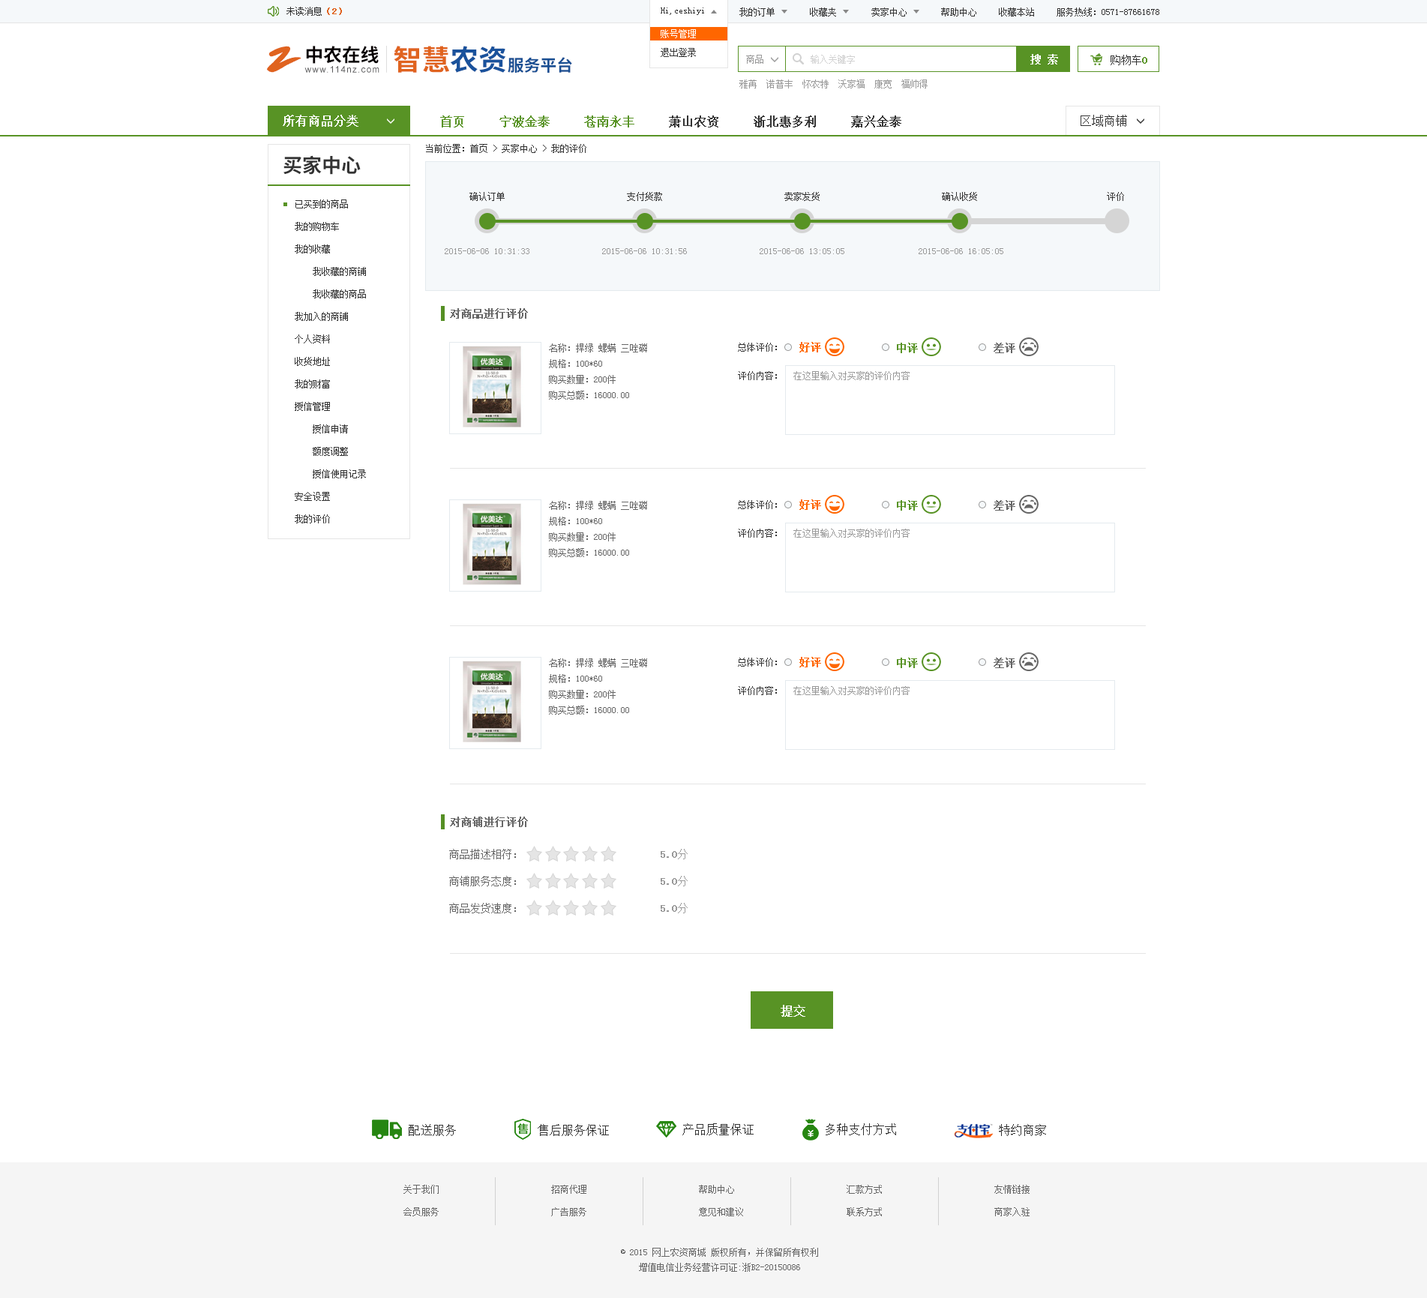
<style>
.page{position:relative;width:1427px;height:1298px;background:#ffffff}
.page>*{position:absolute;margin:0}
.t1{font:9px "SimSun";color:#333333}
.t2{font:9px "SimSun";color:#e0631f;font-weight:bold}
.t3{font:9px/18.8px "SimSun";color:#ffffff}
.t4{font:9px/18.8px "SimSun";color:#333333}
.t5{font:38px "SmudgerLetPlain";color:#e0631f}
.t6{font:18.6px "SourceHanSansCN-Bold";color:#060001}
.t7{font:28.4px "SourceHanSansCN-Bold";color:#e0631f}
.t8{font:28.4px "SourceHanSansCN-Bold";color:#1a529c}
.t9{font:10.5px "SimSun";color:#ffffff;font-weight:bold}
.t10{font:16.3px "SourceHanSansCN-Bold";color:#194f93}
.t11{font:9px "SimSun";color:#999999}
.t12{font:9px "SimSun";color:#d1d1d1}
.t13{font:10.5px "SimSun";color:#333333}
.t14{font:10.5px "SimSun";color:#589325;font-weight:bold}
.t15{font:8.9px "ArialMT";letter-spacing:0.1em;color:#585859}
.t16{font:12px "SimSun";color:#ffffff;font-weight:bold}
.t17{font:12px "SimSun";color:#333333;font-weight:bold}
.t18{font:12px "SimSun";color:#589325;font-weight:bold}
.t19{font:12px "SimSun";color:#333333}
.t20{font:19.5px "SourceHanSansCN-Bold";color:#333333}
.t21{font:9px/22.5px "SimSun";color:#333333}
.t22{font:10.5px "SimSun";color:#666666;font-weight:bold}
.t23{font:10.5px "SimSun";color:#ff6600;font-weight:bold}
.t24{font:9px "SimSun";color:#666666}
.t25{font:10.5px/27px "SimSun";color:#666666}
.t26{font:10.5px/27px "SimSun";color:#999999;font-weight:bold}
.t27{font:10.5px/27px "SimSun";color:#999999}
.t28{font:9px/22.5px "SimSun";color:#666666}
.t29{font:9px/15px "SimSun";color:#666666}
</style>
<div class="page">
<p class="t1" style="left:286px;top:7px;width:56px;height:9px">未读消息<span class="t2">（2）</span></p>
<p class="t1" style="left:661px;top:8px;width:43px;height:7px">Hi,ceshiyi</p>
<p class="t1" style="left:661px;top:8px;width:43px;height:7px">Hi,ceshiyi</p>
<p class="t1" style="left:740px;top:8px;width:35px;height:8px">我的订单</p>
<p class="t1" style="left:810px;top:8px;width:26px;height:8px">收藏夹</p>
<p class="t1" style="left:872px;top:8px;width:35px;height:8px">卖家中心</p>
<p class="t1" style="left:941px;top:8px;width:35px;height:8px">帮助中心</p>
<p class="t1" style="left:999px;top:8px;width:35px;height:8px">收藏本站</p>
<p class="t1" style="left:1057px;top:8px;width:103px;height:8px">服务热线：0571-87661678</p>
<p class="t3" style="left:661px;top:29px;width:35px;height:28px">账号管理<br><span class="t4">退出登录</span></p>
<p class="t5" style="left:267px;top:46px;width:35px;height:27px">Z</p>
<p class="t6" style="left:306px;top:46px;width:73px;height:18px">中农在线</p>
<p class="t7" style="left:394px;top:46px;width:112px;height:27px">智慧<span class="t8">农资</span></p>
<p class="t9" style="left:1030px;top:54px;width:28px;height:10px">搜 索</p>
<p class="t10" style="left:508px;top:57px;width:64px;height:16px">服务平台</p>
<p class="t11" style="left:746px;top:55px;width:18px;height:9px">商品</p>
<p class="t12" style="left:811px;top:55px;width:44px;height:9px">输入关键字</p>
<p class="t13" style="left:1111px;top:55px;width:37px;height:10px">购物车<span class="t14">0</span></p>
<p class="t15" style="left:304px;top:66px;width:76px;height:7px">www.114nz.com</p>
<p class="t11" style="left:740px;top:80px;width:188px;height:8px">雅苒  诺普丰  怀农特  沃家福  康宽  福帅得</p>
<p class="t16" style="left:283px;top:115px;width:75px;height:12px">所有商品分类</p>
<p class="t17" style="left:440px;top:116px;width:462px;height:12px"><span class="t18">首页     宁波金泰     苍南永丰    </span> 萧山农资     浙北惠多利     嘉兴金泰</p>
<p class="t19" style="left:1081px;top:115px;width:46px;height:12px">区域商铺</p>
<p class="t1" style="left:426px;top:144px;width:160px;height:9px">当前位置：首页 &gt; 买家中心 &gt; 我的评价</p>
<p class="t20" style="left:284px;top:155px;width:77px;height:20px">买家中心</p>
<p class="t1" style="left:470px;top:192px;width:35px;height:9px">确认订单</p>
<p class="t1" style="left:627px;top:192px;width:35px;height:9px">支付货款</p>
<p class="t1" style="left:784px;top:192px;width:36px;height:9px">卖家发货</p>
<p class="t1" style="left:942px;top:192px;width:35px;height:9px">确认收货</p>
<p class="t1" style="left:1107px;top:192px;width:17px;height:9px">评价</p>
<p class="t21" style="left:295px;top:200px;width:71px;height:324px">已买到的商品<br>我的购物车<br>我的收藏<br>    我收藏的商铺<br>    我收藏的商品<br>我加入的商铺<br>个人资料<br>收货地址<br>我的财富<br>授信管理<br>    授信申请<br>    额度调整<br>    授信使用记录<br>安全设置<br>我的评价</p>
<p class="t11" style="left:445px;top:248px;width:85px;height:6px">2015-06-06 10:31:33</p>
<p class="t11" style="left:602px;top:248px;width:85px;height:6px">2015-06-06 10:31:56</p>
<p class="t11" style="left:760px;top:248px;width:84px;height:6px">2015-06-06 13:05:05</p>
<p class="t11" style="left:919px;top:248px;width:85px;height:6px">2015-06-06 16:05:05</p>
<p class="t22" style="left:450px;top:308px;width:78px;height:11px">对商品进行评价</p>
<p class="t23" style="left:800px;top:342px;width:21px;height:10px">好评</p>
<p class="t24" style="left:549px;top:344px;width:98px;height:56px">名称：捍绿 螺螨 三唑磷<br>规格：100*60<br>购买数量：200件<br>购买总额：16000.00</p>
<p class="t1" style="left:738px;top:343px;width:39px;height:9px">总体评价：</p>
<p class="t14" style="left:897px;top:343px;width:21px;height:10px">中评</p>
<p class="t22" style="left:994px;top:343px;width:22px;height:10px">差评</p>
<p class="t1" style="left:738px;top:371px;width:39px;height:9px">评价内容：</p>
<p class="t11" style="left:794px;top:371px;width:116px;height:9px">在这里输入对买家的评价内容</p>
<p class="t24" style="left:549px;top:501px;width:98px;height:56px">名称：捍绿 螺螨 三唑磷<br>规格：100*60<br>购买数量：200件<br>购买总额：16000.00</p>
<p class="t1" style="left:738px;top:500px;width:39px;height:9px">总体评价：</p>
<p class="t23" style="left:800px;top:500px;width:21px;height:10px">好评</p>
<p class="t14" style="left:897px;top:500px;width:21px;height:11px">中评</p>
<p class="t22" style="left:994px;top:500px;width:22px;height:11px">差评</p>
<p class="t1" style="left:738px;top:529px;width:39px;height:9px">评价内容：</p>
<p class="t11" style="left:794px;top:529px;width:116px;height:9px">在这里输入对买家的评价内容</p>
<p class="t24" style="left:549px;top:658px;width:98px;height:57px">名称：捍绿 螺螨 三唑磷<br>规格：100*60<br>购买数量：200件<br>购买总额：16000.00</p>
<p class="t1" style="left:738px;top:658px;width:39px;height:9px">总体评价：</p>
<p class="t23" style="left:800px;top:657px;width:21px;height:11px">好评</p>
<p class="t14" style="left:897px;top:658px;width:21px;height:10px">中评</p>
<p class="t22" style="left:994px;top:658px;width:22px;height:10px">差评</p>
<p class="t1" style="left:738px;top:686px;width:39px;height:9px">评价内容：</p>
<p class="t11" style="left:794px;top:686px;width:116px;height:9px">在这里输入对买家的评价内容</p>
<p class="t22" style="left:450px;top:817px;width:78px;height:10px">对商铺进行评价</p>
<p class="t25" style="left:449px;top:849px;width:67px;height:65px">商品描述相符： <br>商铺服务态度： <br>商品发货速度：</p>
<p class="t26" style="left:661px;top:849px;width:27px;height:65px">5.0<span class="t27">分<br></span>5.0<span class="t27">分<br></span>5.0<span class="t27">分</span></p>
<p class="t16" style="left:781px;top:1005px;width:25px;height:12px">提交</p>
<p class="t19" style="left:409px;top:1124px;width:47px;height:12px">配送服务</p>
<p class="t19" style="left:538px;top:1124px;width:71px;height:12px">售后服务保证</p>
<p class="t19" style="left:682px;top:1124px;width:72px;height:12px">产品质量保证</p>
<p class="t19" style="left:826px;top:1124px;width:70px;height:12px">多种支付方式</p>
<p class="t19" style="left:999px;top:1124px;width:47px;height:12px">特约商家</p>
<p class="t28" style="left:404px;top:1185px;width:35px;height:31px">关于我们<br>会员服务</p>
<p class="t28" style="left:551px;top:1185px;width:35px;height:31px">招商代理<br>广告服务</p>
<p class="t28" style="left:699px;top:1185px;width:44px;height:31px">帮助中心<br>意见和建议</p>
<p class="t28" style="left:847px;top:1185px;width:35px;height:31px">汇款方式<br>联系方式</p>
<p class="t28" style="left:994px;top:1185px;width:36px;height:31px">友情链接<br>商家入驻</p>
<p class="t29" style="left:621px;top:1248px;width:197px;height:24px;text-align:center">© 2015 网上农资商城 版权所有，并保留所有权利<br>增值电信业务经营许可证:浙B2-20150086</p>
</div>
